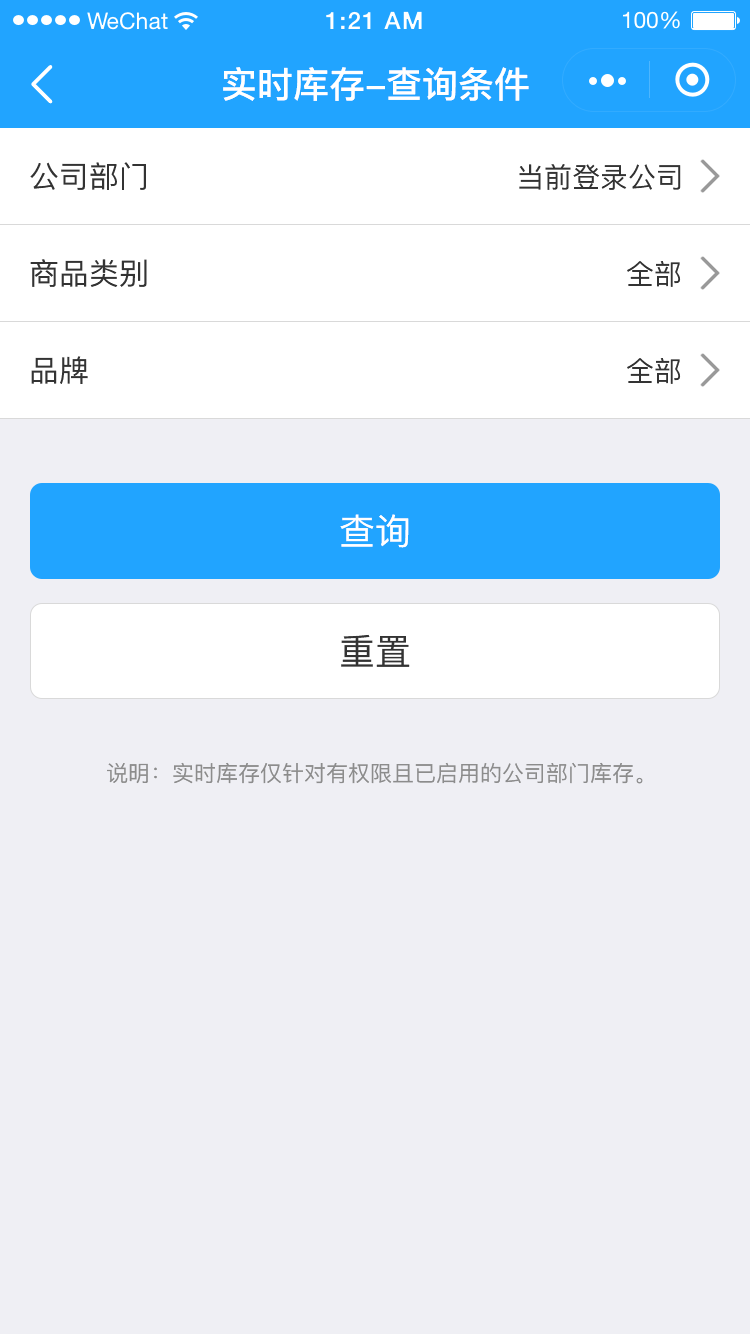
<style>
.page{position:relative;width:750px;height:1334px;background:#efeff4}
.page>*{position:absolute;margin:0}
.t1{font:36px "PingFang-SC-Bold";color:#ffffff}
.t2{font:30px "PingFang-SC-Medium";color:#333333}
.t3{font:28px "PingFang-SC-Medium";color:#333333}
.t4{font:36px "PingFang-SC-Medium";color:#ffffff}
.t5{font:36px "PingFang-SC-Medium";color:#333333}
.t6{font:22px "PingFang-SC-Medium";color:#8c8c8c}
</style>
<div class="page">
<p class="t1" style="left:223px;top:67px;width:306px;height:34px">实时库存-查询条件</p>
<p class="t2" style="left:30px;top:162px;width:116px;height:28px">公司部门</p>
<p class="t3" style="left:519px;top:164px;width:162px;height:26px">当前登录公司</p>
<p class="t2" style="left:30px;top:259px;width:117px;height:28px">商品类别</p>
<p class="t3" style="left:627px;top:261px;width:54px;height:26px">全部</p>
<p class="t2" style="left:31px;top:356px;width:57px;height:28px">品牌</p>
<p class="t3" style="left:627px;top:358px;width:54px;height:26px">全部</p>
<p class="t4" style="left:340px;top:514px;width:69px;height:34px">查询</p>
<p class="t5" style="left:341px;top:634px;width:69px;height:33px">重置</p>
<p class="t6" style="left:107px;top:762px;width:536px;height:22px">说明：实时库存仅针对有权限且已启用的公司部门库存。</p>
</div>
